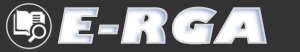
<style>
.page{position:relative;width:300px;height:52px;background:#333333}
.page>*{position:absolute;margin:0}
.t1{font:48px "GillSans-UltraBold";font-weight:bold;font-style:italic;scale:1.1 1}
</style>
<div class="page">
<p class="t1" style="left:57px;top:6px;width:210px;height:39px">E-RGA</p>
</div>
